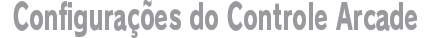
<style>
.page{position:relative;width:432px;height:38px;background:#ffffff}
.page>*{position:absolute;margin:0}
.t1{font:36px "RodinPro-EB";letter-spacing:0.003em;color:#989a9d;scale:0.62 1}
</style>
<div class="page">
<p class="t1" style="left:13px;top:0px;width:404px;height:38px">Configurações do Controle Arcade</p>
</div>
